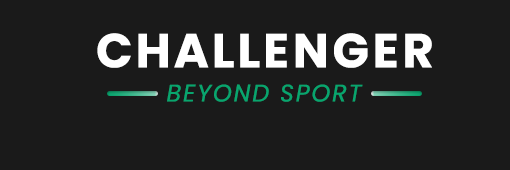
<style>
.page{position:relative;width:510px;height:170px;background:#1a1a1a}
.page>*{position:absolute;margin:0}
.t1{font:48px "Poppins-Bold";letter-spacing:0.075em;color:#ffffff;text-transform:uppercase}
.t2{font:24px "Poppins-Italic";letter-spacing:0.075em;color:#08a56e;text-transform:uppercase}
</style>
<div class="page">
<p class="t1" style="left:97px;top:33px;width:335px;height:35px">CHALLENGER</p>
<p class="t2" style="left:167px;top:84px;width:196px;height:18px">BEYOND SPORT</p>
</div>
